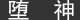
<style>
.page{position:relative;width:80px;height:20px;background:#333333}
.page>*{position:absolute;margin:0}
.t1{font:22px "SimHei";letter-spacing:0.025em;color:#ffffff}
</style>
<div class="page">
<p class="t1" style="left:8px;top:0px;width:66px;height:21px">堕  神</p>
</div>
